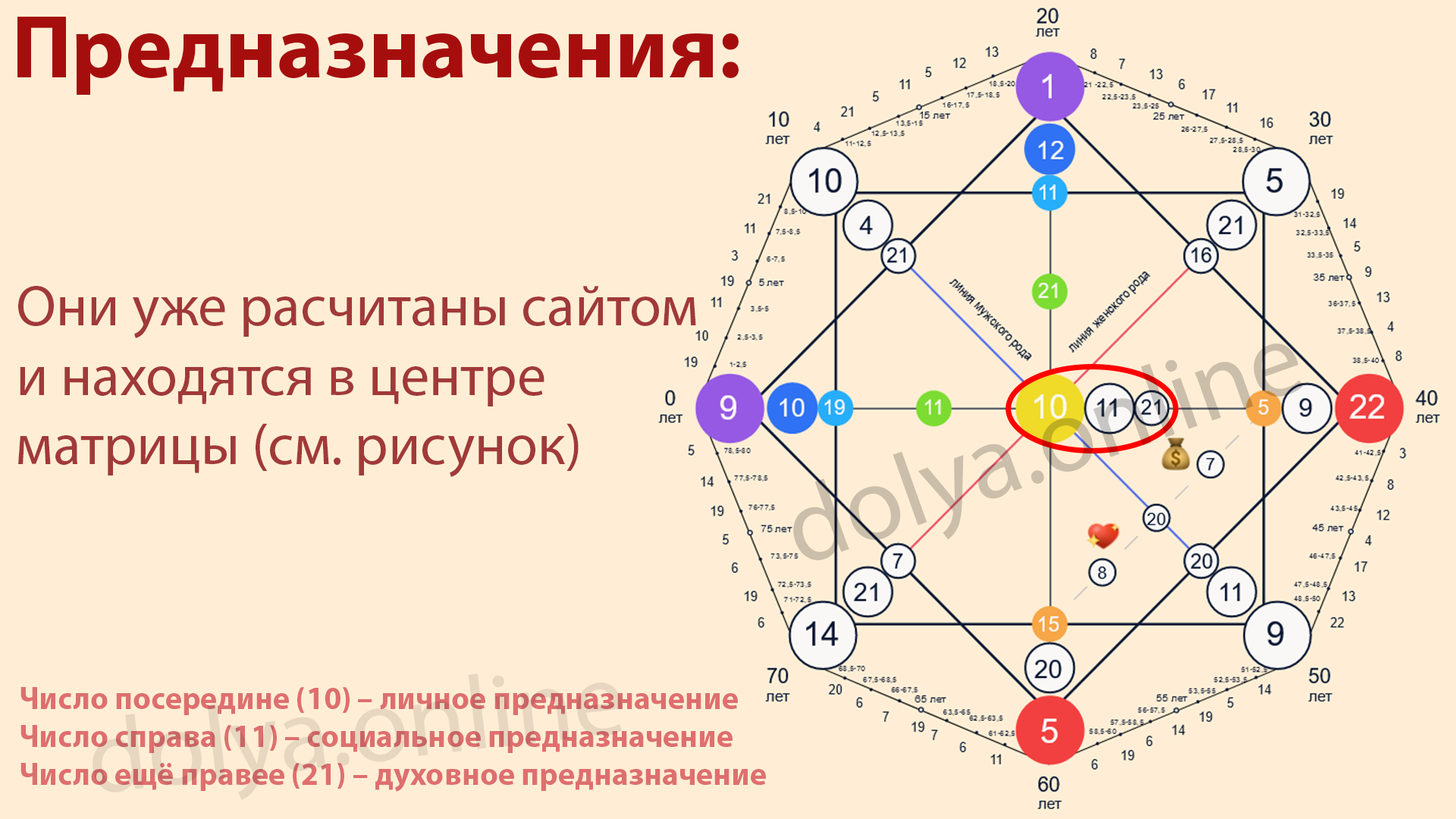
<style>
.page{position:relative;width:1456px;height:819px;background:#ffeed5}
.page>*{position:absolute;margin:0}
.t1{font:89.5px "MyriadPro-Bold";color:#a60e0e}
.t2{font:57.9px "MyriadPro-Regular";color:#a13939}
.t3{font:105.3px "MyriadPro-Regular";color:#e7d7c1}
.t4{font:31.6px "MyriadPro-Bold";color:#de6f6f}
</style>
<div class="page">
<p class="t1" style="left:17px;top:17px;width:722px;height:78px">Предназначения:</p>
<p class="t2" style="left:18px;top:286px;width:678px;height:191px">Они уже расчитаны сайтом <br>и находятся в центре<br>матрицы (см. рисунок)</p>
<p class="t3" style="left:93px;top:673px;width:530px;height:127px;rotate:-7deg">dolya.online</p>
<p class="t4" style="left:20px;top:687px;width:746px;height:105px">Число посередине (10) – личное предназначение<br>Число справа (11) – социальное предназначение<br>Число ещё правее (21) – духовное предназначение</p>
</div>
